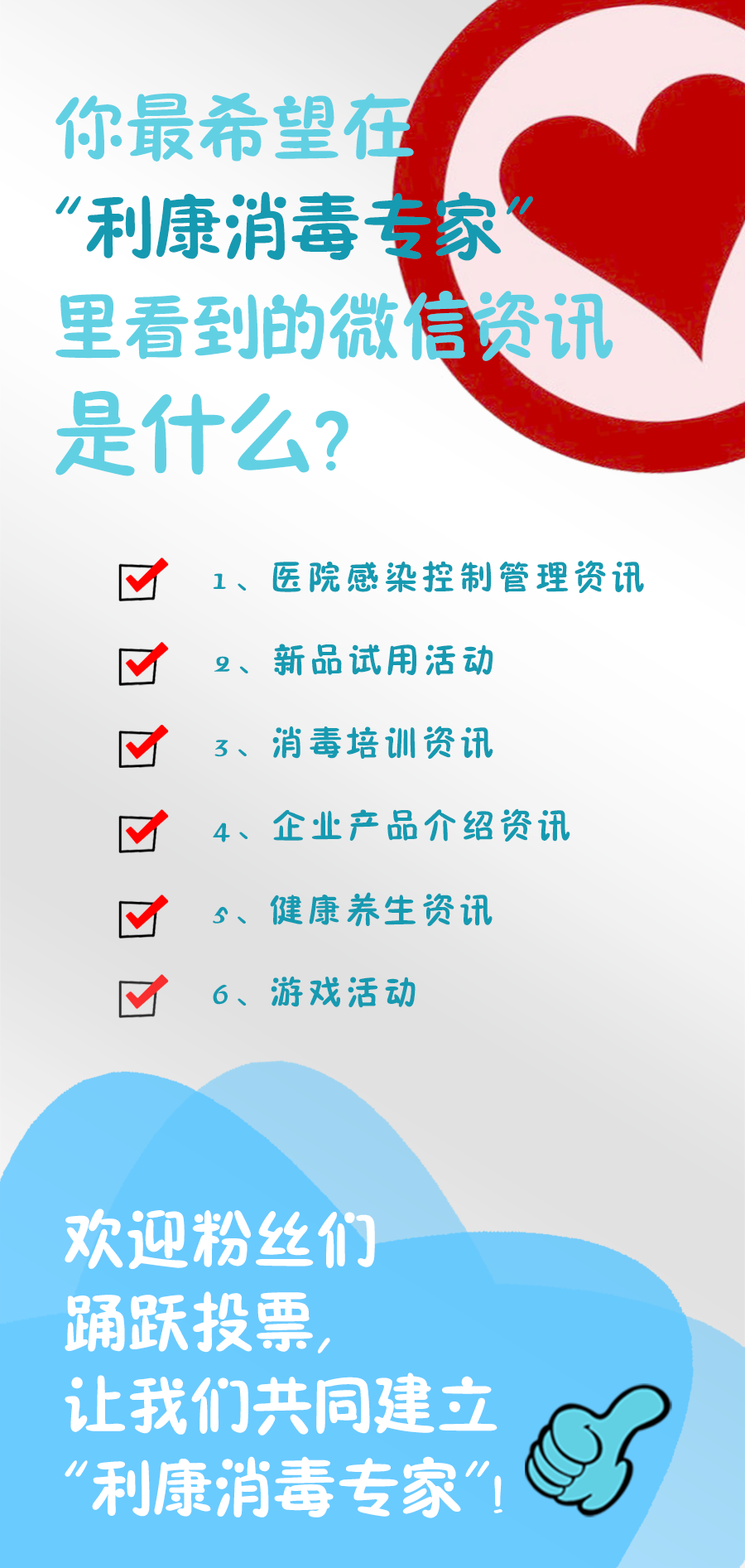
<style>
.page{position:relative;width:745px;height:1568px}
.page>*{position:absolute;margin:0}
.t1{font:74.5px/99.4px "FZSEJW--GB1-0";letter-spacing:0.075em;color:#169ab1}
.t2{font:74.5px/99.4px "FZSEJW--GB1-0";letter-spacing:0.075em;color:#62d0e3}
.t3{font:91.1px/99.4px "FZSEJW--GB1-0";letter-spacing:0.075em;color:#62d0e3}
.t4{font:34.8px "FZSEJW--GB1-0";letter-spacing:0.09em;color:#169ab1}
.t5{font:66.3px/82.8px "FZSEK--GBK1-0";letter-spacing:0.075em;color:#ffffff}
</style>
<div class="page">
<p class="t1" style="left:55px;top:93px;width:559px;height:383px"><span class="t2">你最希望在<br></span>“利康消毒专家”<br><span class="t2">里看到的微信资讯<br></span><span class="t3">是什么？</span></p>
<p class="t4" style="left:213px;top:560px;width:431px;height:33px">1、医院感染控制管理资讯</p>
<p class="t4" style="left:214px;top:644px;width:280px;height:32px">2、新品试用活动</p>
<p class="t4" style="left:215px;top:726px;width:279px;height:33px">3、消毒培训资讯</p>
<p class="t4" style="left:213px;top:808px;width:358px;height:34px">4、企业产品介绍资讯</p>
<p class="t4" style="left:213px;top:892px;width:280px;height:35px">5、健康养生资讯</p>
<p class="t4" style="left:213px;top:976px;width:203px;height:32px">6、游戏活动</p>
<p class="t5" style="left:65px;top:1209px;width:438px;height:309px">欢迎粉丝们<br>踊跃投票，<br>让我们共同建立<br>“利康消毒专家”！</p>
</div>
